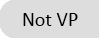
<style>
.page{position:relative;width:99px;height:38px;background:#dddddd}
.page>*{position:absolute;margin:0}
.t1{font:12px "Calibri";color:#000000}
</style>
<div class="page">
<p class="t1" style="left:23px;top:13px;width:55px;height:13px">Not VP</p>
</div>
